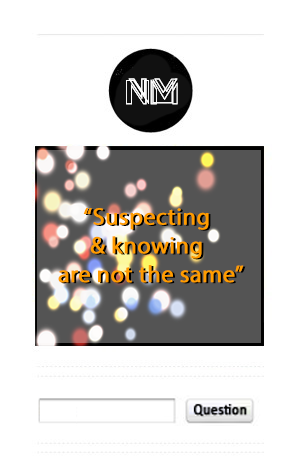
<style>
.page{position:relative;width:300px;height:470px;background:#ffffff}
.page>*{position:absolute;margin:0}
.t1{font:36px "TESLA";color:#ffffff;font-weight:bold}
.t2{font:24px "MyriadPro-Regular";color:#ff9c00;font-weight:bold}
.t3{font:24px "MyriadPro-Regular";font-weight:bold}
</style>
<div class="page">
<p class="t1" style="left:126px;top:78px;width:52px;height:27px">NM</p>
<p class="t1" style="left:126px;top:78px;width:52px;height:27px">NM</p>
<p class="t2" style="left:58px;top:208px;width:186px;height:75px;text-align:center">“Suspecting <br>&amp; knowing <br>are not the same”</p>
<p class="t3" style="left:60px;top:209px;width:186px;height:75px;text-align:center">“Suspecting <br>&amp; knowing <br>are not the same”</p>
</div>
